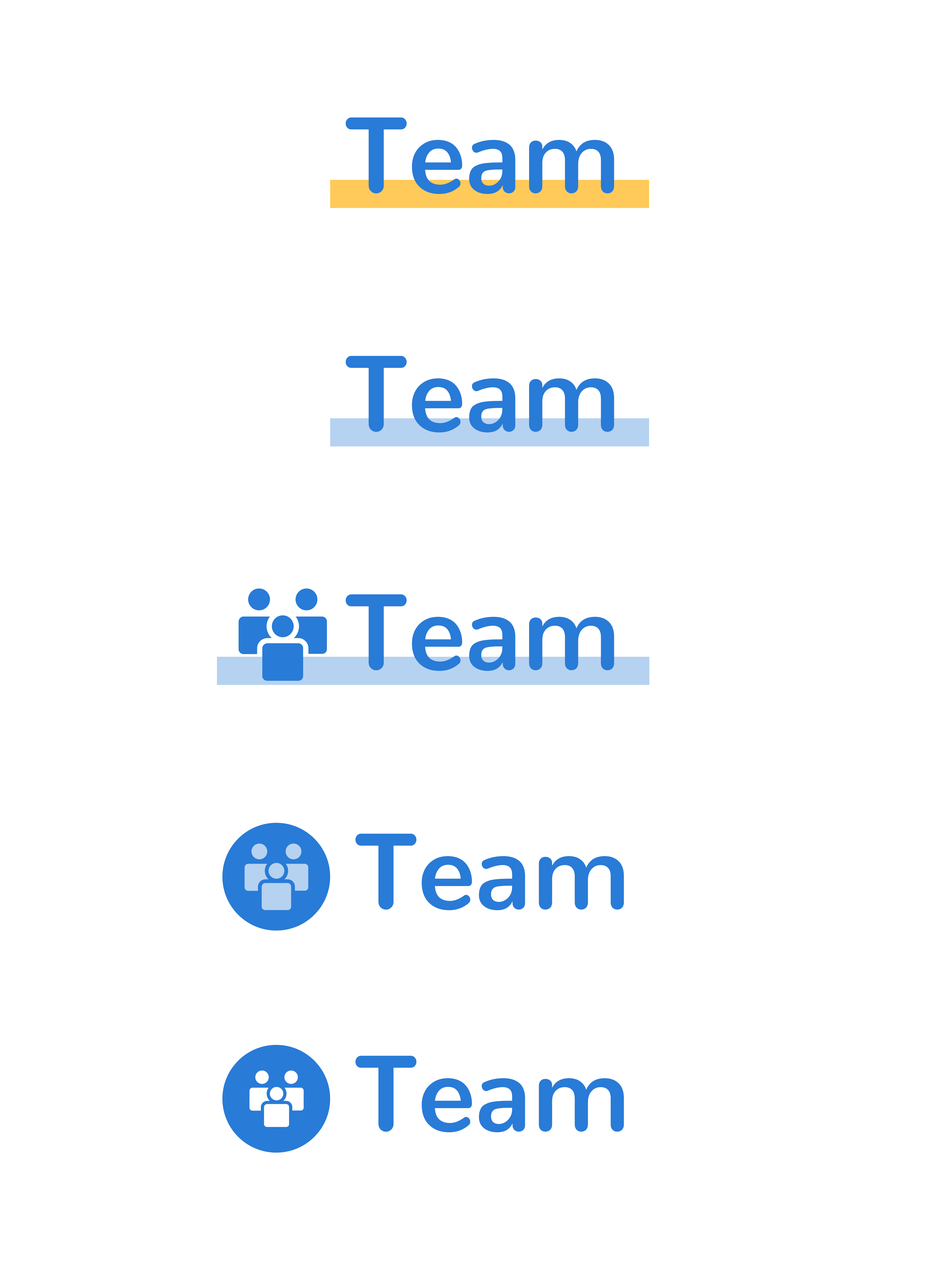
<style>
.page{position:relative;width:937px;height:1273px;background:#ffffff}
.page>*{position:absolute;margin:0}
.t1{font:107.7px "Nunito-Bold";color:#287bd7}
</style>
<div class="page">
<p class="t1" style="left:346px;top:117px;width:268px;height:77px">Team</p>
<p class="t1" style="left:346px;top:356px;width:268px;height:77px">Team</p>
<p class="t1" style="left:346px;top:594px;width:268px;height:77px">Team</p>
<p class="t1" style="left:355px;top:833px;width:269px;height:77px">Team</p>
<p class="t1" style="left:355px;top:1055px;width:269px;height:77px">Team</p>
</div>
